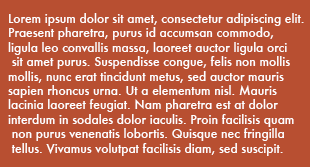
<style>
.page{position:relative;width:310px;height:167px;background:#b84f31}
.page>*{position:absolute;margin:0}
.t1{font:12px "Futura-Medium";color:#ffffff}
</style>
<div class="page">
<p class="t1" style="left:8px;top:13px;width:296px;height:143px">Lorem ipsum dolor sit amet, consectetur adipiscing elit.<br>Praesent pharetra, purus id accumsan commodo, <br>ligula leo convallis massa, laoreet auctor ligula orci<br> sit amet purus. Suspendisse congue, felis non mollis <br>mollis, nunc erat tincidunt metus, sed auctor mauris <br>sapien rhoncus urna. Ut a elementum nisl. Mauris <br>lacinia laoreet feugiat. Nam pharetra est at dolor <br>interdum in sodales dolor iaculis. Proin facilisis quam<br> non purus venenatis lobortis. Quisque nec fringilla<br> tellus. Vivamus volutpat facilisis diam, sed suscipit.</p>
</div>
